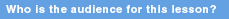
<style>
.page{position:relative;width:229px;height:19px;background:#64a1e2}
.page>*{position:absolute;margin:0}
.t1{font:11px "Helvetica-Bold";letter-spacing:0.05em;color:#ffffff}
</style>
<div class="page">
<p class="t1" style="left:6px;top:5px;width:210px;height:8px">Who is the audience for this lesson?</p>
</div>
